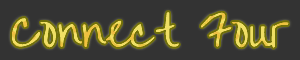
<style>
.page{position:relative;width:300px;height:60px;background:#333333}
.page>*{position:absolute;margin:0}
.t1{font:39.7px "OvertheRainbow";color:#efde63;scale:1.23 1}
</style>
<div class="page">
<p class="t1" style="left:11px;top:12px;width:278px;height:36px">Connect Four</p>
</div>
